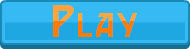
<style>
.page{position:relative;width:190px;height:49px;background:#35baf3}
.page>*{position:absolute;margin:0}
.t1{font:36px "Brassett"}
</style>
<div class="page">
<p class="t1" style="left:53px;top:5px;width:84px;height:32px">Play</p>
</div>
